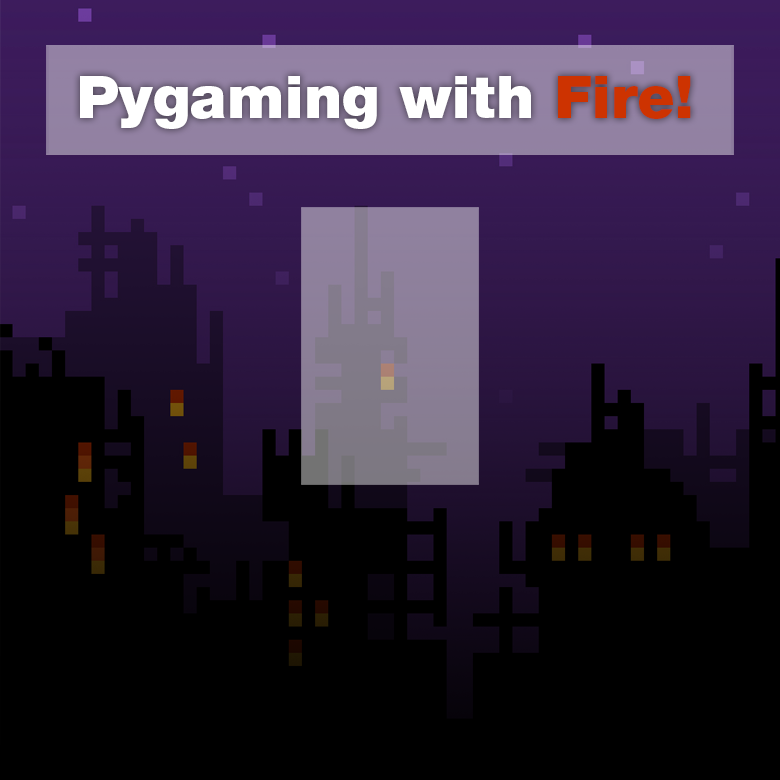
<style>
.page{position:relative;width:780px;height:780px;background:#000000}
.page>*{position:absolute;margin:0}
.t1{font:59.4px "HelveticaNeueLTStd-Blk";letter-spacing:0.005em;color:#ffffff}
.t2{font:59.4px "HelveticaNeueLTStd-Blk";letter-spacing:0.005em;color:#cd3301}
</style>
<div class="page">
<p class="t1" style="left:80px;top:76px;width:611px;height:53px">Pygaming with <span class="t2">Fire!</span></p>
</div>
